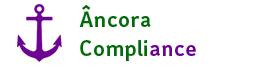
<style>
.page{position:relative;width:260px;height:70px;background:#ffffff}
.page>*{position:absolute;margin:0}
.t1{font:24px "CertaSans-Medium";color:#026c0d}
.t2{font:24px "CertaSans-Medium";color:#6c0392}
</style>
<div class="page">
<p class="t1" style="left:79px;top:5px;width:117px;height:56px">Âncora<br>Compli<span class="t2">ance</span></p>
</div>
